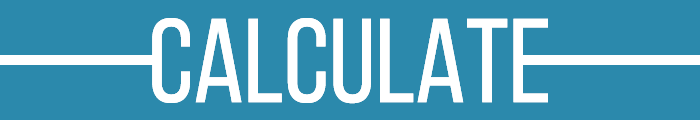
<style>
.page{position:relative;width:700px;height:120px;background:#2b89ac}
.page>*{position:absolute;margin:0}
.t1{font:119.1px "BebasNeueRegular";color:#ffffff}
</style>
<div class="page">
<p class="t1" style="left:152px;top:18px;width:396px;height:86px">CALCULATE</p>
</div>
